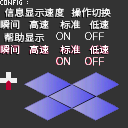
<style>
.page{position:relative;width:128px;height:128px;background:#333333}
.page>*{position:absolute;margin:0}
.t1{font:9.5px "SourceHanSansSC-Regular";color:#e9e9e9;scale:1.05 1}
.t2{font:9.5px "SourceHanSansSC-Regular";color:#e7e7e7;scale:1.05 1}
.t3{font:9.5px "SourceHanSansSC-Regular";color:#ffffff;scale:1.05 1}
</style>
<div class="page">
<p class="t1" style="left:5px;top:7px;width:59px;height:10px">信息显示速度</p>
<p class="t1" style="left:71px;top:7px;width:40px;height:11px">操作切换</p>
<p class="t1" style="left:0px;top:19px;width:109px;height:11px">瞬间    高速     标准    低速</p>
<p class="t2" style="left:4px;top:32px;width:41px;height:10px">帮助显示</p>
<p class="t3" style="left:0px;top:44px;width:109px;height:11px">瞬间    高速     标准    低速</p>
</div>
